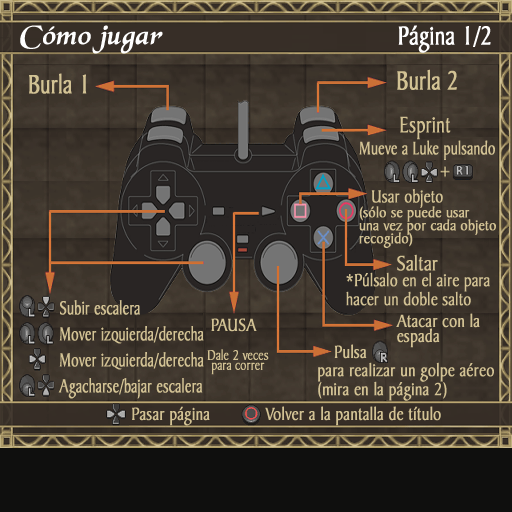
<style>
.page{position:relative;width:512px;height:512px}
.page>*{position:absolute;margin:0}
.t1{font:27.9px "BlackChancery";color:#ffffff;font-weight:bold;font-style:italic;scale:1.06 1}
.t2{font:27.6px "BakerSignetBT-Roman";color:#ffffff;font-weight:bold;scale:0.8 1}
.t3{font:27.9px "BakerSignetBT-Roman";color:#d2c294;font-weight:bold;scale:0.77 1}
.t4{font:24px "BakerSignetBT-Roman";color:#d2c294;font-weight:bold;scale:0.77 1}
.t5{font:19.5px "BakerSignetBT-Roman";color:#d2c294;font-weight:bold;scale:0.75 1}
.t6{font:18.9px "BakerSignetBT-Roman";color:#d2c294;font-weight:bold;scale:0.83 1}
.t7{font:15.6px/13px "BakerSignetBT-Roman";color:#d2c294;font-weight:bold;scale:0.92 1}
.t8{font:22.2px "BakerSignetBT-Roman";color:#d2c294;font-weight:bold;scale:0.84 1}
.t9{font:18.9px/19px "BakerSignetBT-Roman";color:#d2c294;font-weight:bold;scale:0.83 1}
.t10{font:20.4px/26px "BakerSignetBT-Roman";color:#d2c294;font-weight:bold;scale:0.72 1}
.t11{font:18.9px "BakerSignetBT-Roman";color:#d2c294;font-weight:bold;scale:0.84 1}
.t12{font:18.9px/15px "BakerSignetBT-Roman";color:#d2c294;font-weight:bold;scale:0.84 1}
.t13{font:15px/10px "BakerSignetBT-Roman";color:#d2c294;font-weight:bold;scale:0.8 1}
.t14{font:18.9px/19px "BakerSignetBT-Roman";color:#d2c294;font-weight:bold;scale:0.84 1}
</style>
<div class="page">
<p class="t1" style="left:20px;top:25px;width:143px;height:29px">Cómo jugar</p>
<p class="t2" style="left:398px;top:25px;width:93px;height:28px">Página 1/2</p>
<p class="t3" style="left:29px;top:73px;width:58px;height:21px">Burla 1</p>
<p class="t3" style="left:397px;top:69px;width:60px;height:21px">Burla 2</p>
<p class="t4" style="left:400px;top:116px;width:51px;height:24px">Esprint</p>
<p class="t5" style="left:359px;top:140px;width:136px;height:20px">Mueve a Luke pulsando</p>
<p class="t6" style="left:371px;top:189px;width:72px;height:19px">Usar objeto</p>
<p class="t7" style="left:359px;top:206px;width:137px;height:42px">(sólo se puede usar<br>una vez por cada objeto<br>recogido)</p>
<p class="t8" style="left:397px;top:254px;width:41px;height:17px">Saltar</p>
<p class="t9" style="left:346px;top:272px;width:144px;height:34px">*Púlsalo en el aire para<br>hacer un doble salto</p>
<p class="t10" style="left:58px;top:300px;width:146px;height:99px">Subir escalera<br>Mover izquierda/derecha<br>Mover izquierda/derecha<br>Agacharse/bajar escalera</p>
<p class="t11" style="left:211px;top:318px;width:46px;height:14px">PAUSA</p>
<p class="t12" style="left:396px;top:313px;width:84px;height:35px">Atacar con la<br>espada</p>
<p class="t13" style="left:207px;top:349px;width:62px;height:26px;text-align:center">Dale 2 veces<br>para correr</p>
<p class="t11" style="left:334px;top:344px;width:33px;height:15px">Pulsa</p>
<p class="t14" style="left:318px;top:362px;width:176px;height:39px">para realizar un golpe aéreo<br>(mira en la página 2)</p>
<p class="t11" style="left:132px;top:406px;width:309px;height:20px">Pasar página            Volver a la pantalla de título</p>
</div>
